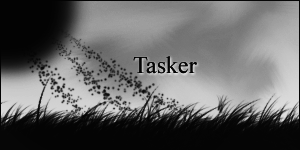
<style>
.page{position:relative;width:300px;height:150px}
.page>*{position:absolute;margin:0}
.t1{font:24px "TimesNewRomanPSMT";color:#040404}
</style>
<div class="page">
<p class="t1" style="left:133px;top:56px;width:64px;height:18px">Tasker</p>
</div>
